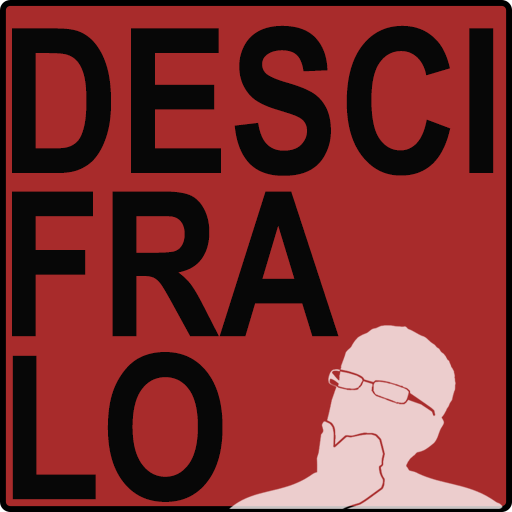
<style>
.page{position:relative;width:512px;height:512px;background:#a82b2b}
.page>*{position:absolute;margin:0}
.t1{font:201.6px/163.1px "Arial-BoldMT";color:#070707;scale:0.82 1}
</style>
<div class="page">
<p class="t1" style="left:12px;top:25px;width:482px;height:477px">DESCI<br>FRA<br>LO</p>
</div>
